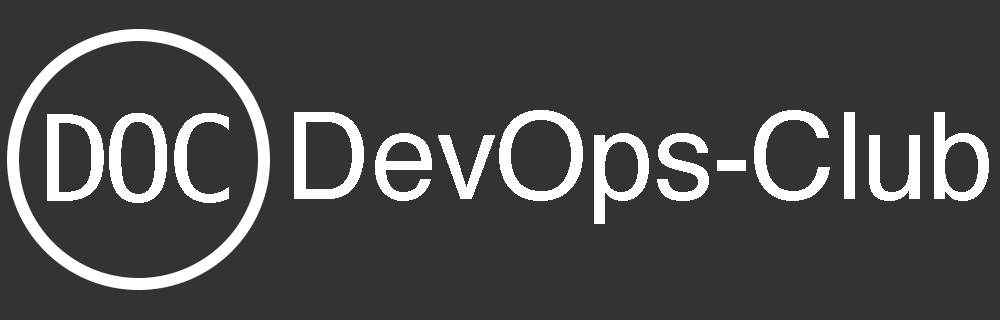
<style>
.page{position:relative;width:1000px;height:320px;background:#333333}
.page>*{position:absolute;margin:0}
.t1{font:120px "Hack";letter-spacing:-0.075em;color:#ffffff}
.t2{font:120px "Helvetica";letter-spacing:-0.01em;color:#ffffff}
</style>
<div class="page">
<p class="t1" style="left:47px;top:113px;width:182px;height:90px">DOC</p>
<p class="t2" style="left:294px;top:110px;width:695px;height:114px">DevOps-Club</p>
</div>
